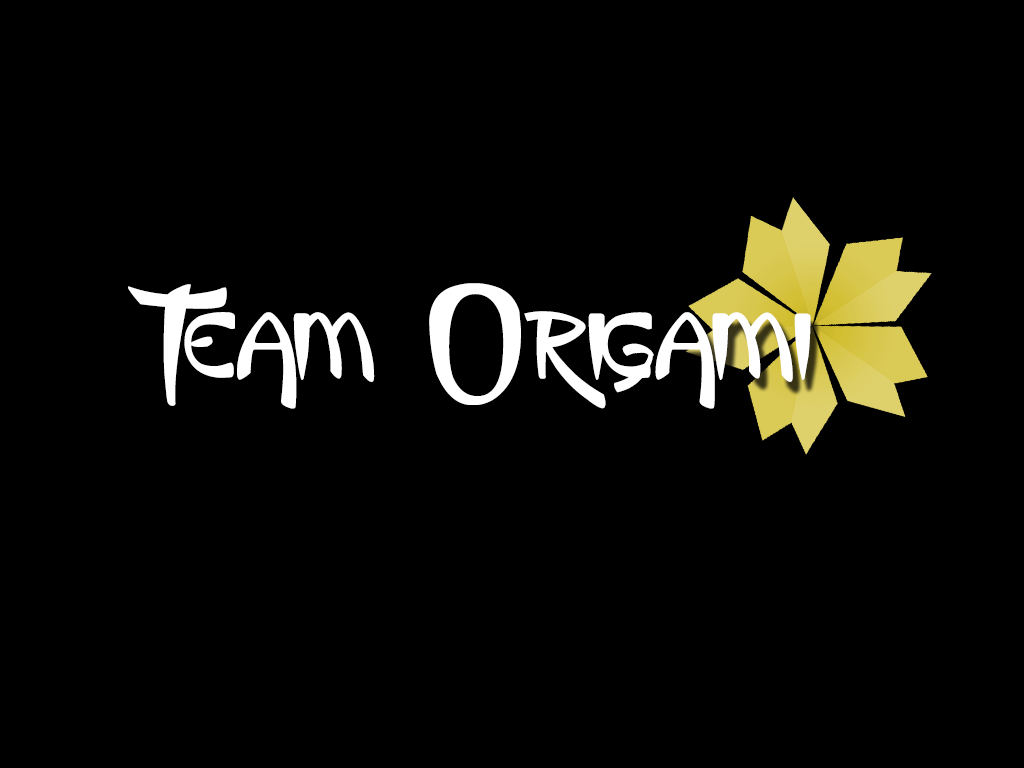
<style>
.page{position:relative;width:1024px;height:768px;background:#000000}
.page>*{position:absolute;margin:0}
.t1{font:144px "KingLuau";letter-spacing:-0.025em;color:#ffffff}
</style>
<div class="page">
<p class="t1" style="left:128px;top:283px;width:683px;height:126px">Team Origami</p>
</div>
